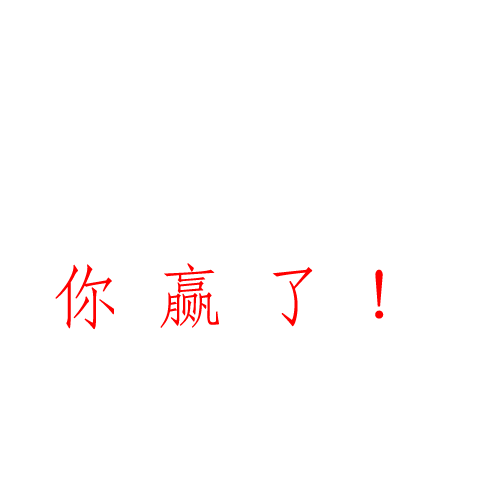
<style>
.page{position:relative;width:480px;height:480px;background:#ffffff}
.page>*{position:absolute;margin:0}
.t1{font:69px "STFangsong";color:#ff0000}
</style>
<div class="page">
<p class="t1" style="left:55px;top:263px;width:329px;height:67px">你  赢  了  ！</p>
</div>
